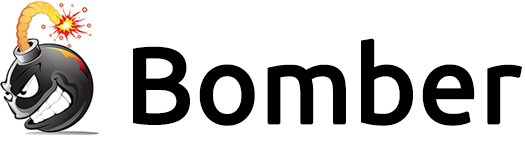
<style>
.page{position:relative;width:525px;height:147px;background:#ffffff}
.page>*{position:absolute;margin:0}
.t1{font:106.7px "Ubuntu-Regular";letter-spacing:-0.01em;color:#000000;font-weight:bold}
</style>
<div class="page">
<p class="t1" style="left:133px;top:38px;width:389px;height:88px">Bomber</p>
</div>
